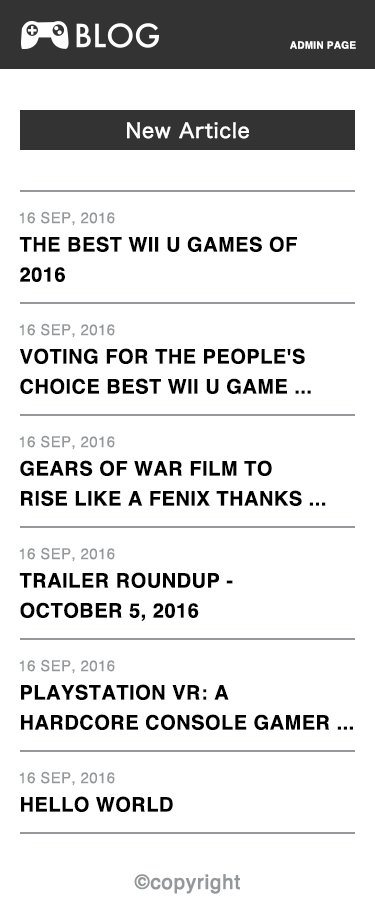
<style>
.page{position:relative;width:375px;height:920px;background:#ffffff}
.page>*{position:absolute;margin:0}
.t1{font:10px "Helvetica-Bold";letter-spacing:0.025em;color:#ffffff;text-transform:uppercase}
.t2{font:20px "HiraKakuProN-W3";letter-spacing:0.025em;color:#ffffff;font-weight:bold}
.t3{font:15px "Helvetica";letter-spacing:0.025em;color:#95989a;text-transform:uppercase}
.t4{font:20px/30px "Helvetica-Bold";letter-spacing:0.025em;color:#000000;text-transform:uppercase}
.t5{font:20px "Helvetica-Bold";letter-spacing:0.025em;color:#000000;text-transform:uppercase}
.t6{font:20px "Helvetica";letter-spacing:0.025em;color:#95989a;font-weight:bold}
</style>
<div class="page">
<p class="t1" style="left:290px;top:41px;width:66px;height:8px">Admin page</p>
<p class="t2" style="left:127px;top:122px;width:122px;height:17px">New Article</p>
<p class="t3" style="left:19px;top:211px;width:96px;height:15px">16 Sep, 2016</p>
<p class="t4" style="left:19px;top:236px;width:278px;height:46px">The Best Wii U Games of <br>2016</p>
<p class="t3" style="left:19px;top:323px;width:96px;height:15px">16 Sep, 2016</p>
<p class="t4" style="left:19px;top:348px;width:292px;height:46px">VOTING FOR THE PEOPLE'S <br>CHOICE BEST WII U GAME ...</p>
<p class="t3" style="left:19px;top:435px;width:96px;height:15px">16 Sep, 2016</p>
<p class="t4" style="left:20px;top:460px;width:306px;height:46px">Gears of War film to<br>rise like a Fenix thanks ...</p>
<p class="t3" style="left:19px;top:547px;width:96px;height:15px">16 Sep, 2016</p>
<p class="t4" style="left:19px;top:572px;width:214px;height:49px">Trailer Roundup - <br>October 5, 2016</p>
<p class="t3" style="left:19px;top:659px;width:96px;height:15px">16 Sep, 2016</p>
<p class="t4" style="left:21px;top:684px;width:332px;height:46px">PlayStation VR: A <br>Hardcore Console Gamer ...</p>
<p class="t3" style="left:19px;top:771px;width:96px;height:15px">16 Sep, 2016</p>
<p class="t5" style="left:21px;top:796px;width:152px;height:16px">Hello World</p>
<p class="t6" style="left:134px;top:874px;width:106px;height:20px">©copyright</p>
</div>
